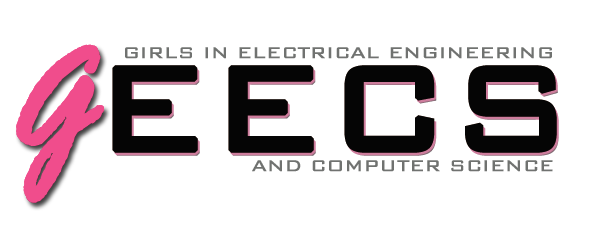
<style>
.page{position:relative;width:600px;height:244px;background:#ffffff}
.page>*{position:absolute;margin:0}
.t1{font:159px "BankGothicBT-Light";color:#050505;font-weight:bold}
.t2{font:159px "RageItalic";color:#050505;font-weight:bold}
.t3{font:20.7px "BankGothicBT-Light";color:#6f716f;font-weight:bold}
.t4{font:20.7px "BankGothicBT-Light";color:#707270;font-weight:bold}
</style>
<div class="page">
<p class="t1" style="left:16px;top:44px;width:541px;height:159px"><span class="t2">G</span>EECS</p>
<p class="t3" style="left:125px;top:47px;width:427px;height:12px">GIRLS IN ELECTRICAL ENGINEERING</p>
<p class="t4" style="left:252px;top:160px;width:301px;height:12px">AND COMPUTER SCIENCE</p>
</div>
